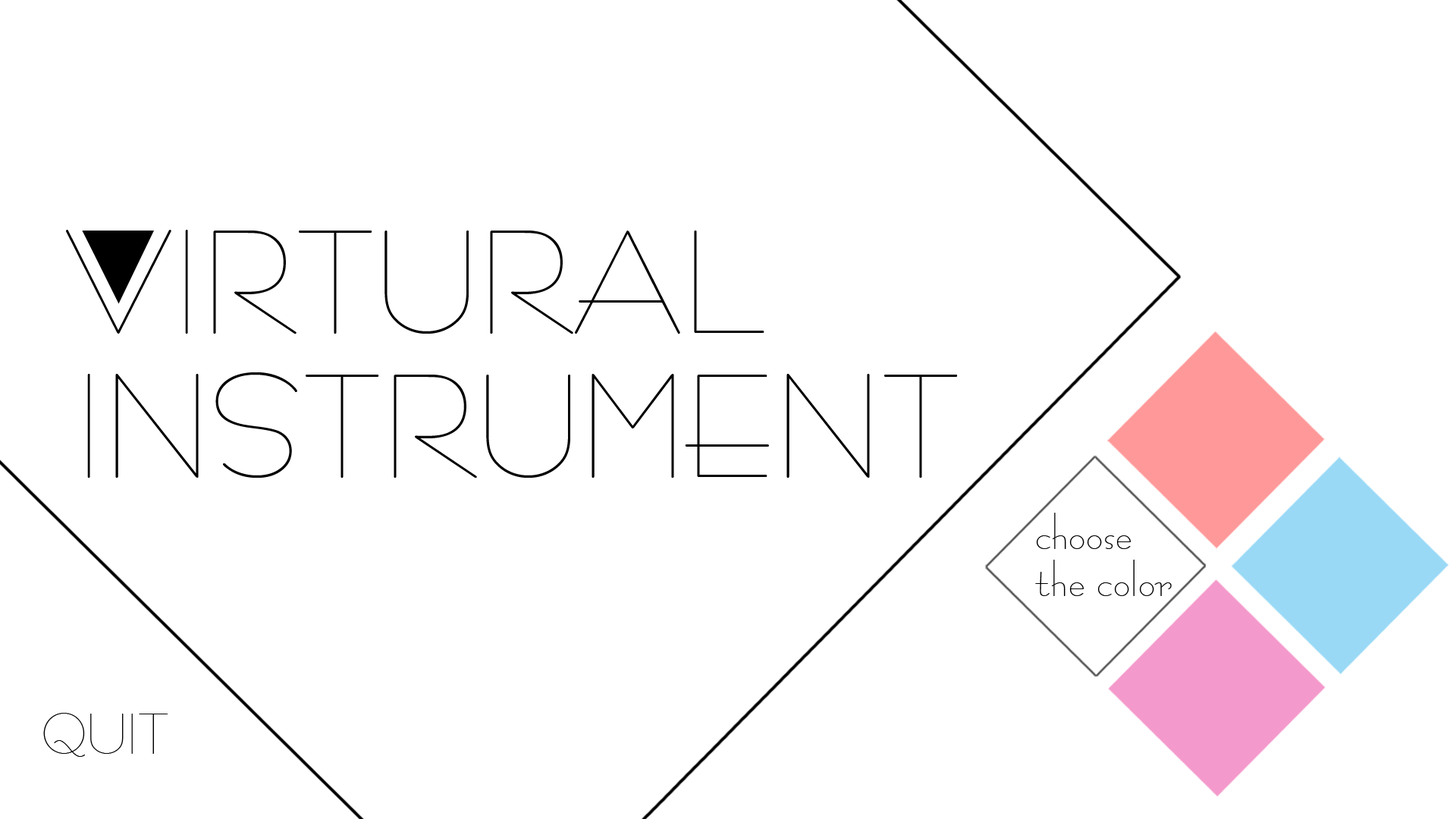
<style>
.page{position:relative;width:1456px;height:819px;background:#ffffff}
.page>*{position:absolute;margin:0}
.t1{font:113.7px "BernhardFashionBT-Regular";color:#000000}
.t2{font:46.7px/46.7px "BernhardFashionBT-Regular";color:#000000}
.t3{font:44.2px "BernhardFashionBT-Regular";color:#000000}
</style>
<div class="page">
<p class="t1" style="left:66px;top:230px;width:698px;height:104px">VIRTURAL</p>
<p class="t1" style="left:87px;top:372px;width:871px;height:107px">INSTRUMENT</p>
<p class="t2" style="left:1035px;top:513px;width:137px;height:83px">choose<br>the color</p>
<p class="t3" style="left:43px;top:713px;width:125px;height:44px">QUIT</p>
</div>
